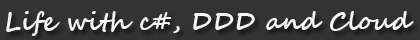
<style>
.page{position:relative;width:420px;height:40px;background:#333333}
.page>*{position:absolute;margin:0}
.t1{font:25px "SegoeScript-Bold";color:#f6f6f6}
</style>
<div class="page">
<p class="t1" style="left:6px;top:11px;width:408px;height:25px">Life with c#, DDD and Cloud</p>
</div>
